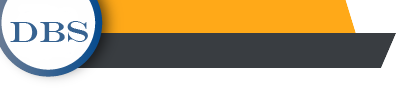
<style>
.page{position:relative;width:396px;height:88px;background:#ffffff}
.page>*{position:absolute;margin:0}
.t1{font:30px "EngraversMT";color:#376391}
</style>
<div class="page">
<p class="t1" style="left:10px;top:21px;width:78px;height:21px">DBS</p>
</div>
